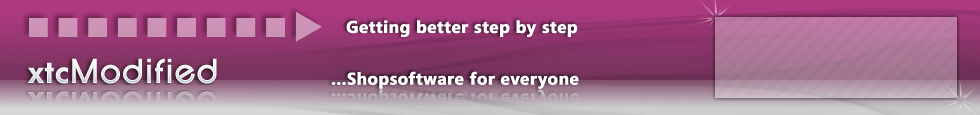
<style>
.page{position:relative;width:980px;height:115px}
.page>*{position:absolute;margin:0}
.t1{font:17px "Segoe-Bold";letter-spacing:0.01em;color:#ffffff;font-weight:bold}
</style>
<div class="page">
<p class="t1" style="left:346px;top:20px;width:232px;height:17px">Getting better step by step</p>
<p class="t1" style="left:331px;top:71px;width:248px;height:18px">...Shopsoftware for everyone</p>
</div>
